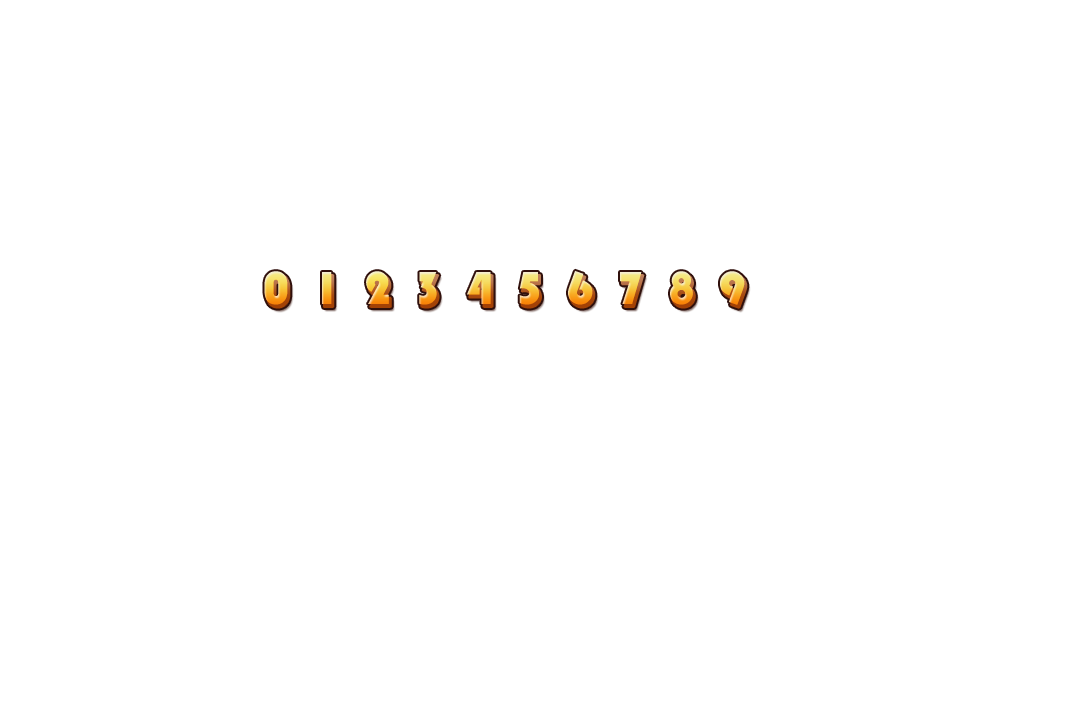
<style>
.page{position:relative;width:1080px;height:720px;background:#ffffff}
.page>*{position:absolute;margin:0}
.t1{font:48px "STHupo"}
</style>
<div class="page">
<p class="t1" style="left:264px;top:270px;width:481px;height:35px">0  1  2  3  4  5  6  7  8  9</p>
</div>
